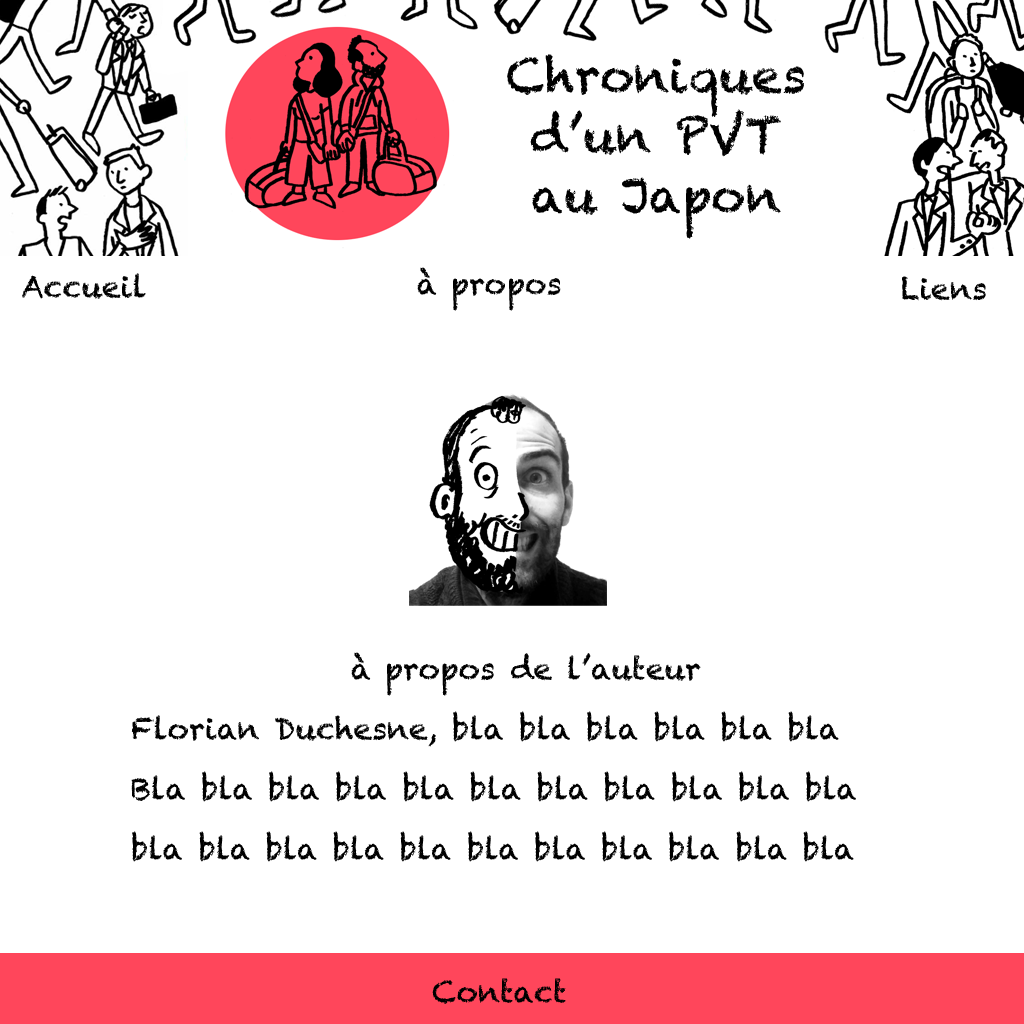
<style>
.page{position:relative;width:1024px;height:1024px;background:#ffffff}
.page>*{position:absolute;margin:0}
.t1{font:30px/60px "Chalkduster";color:#000000}
</style>
<div class="page">
<p class="t1" style="left:131px;top:652px;width:725px;height:210px;text-align:center">à propos de l’auteur<br>Florian Duchesne, bla bla bla bla bla bla<br>Bla bla bla bla bla bla bla bla bla bla bla bla bla bla bla bla bla bla bla bla bla bla</p>
</div>
